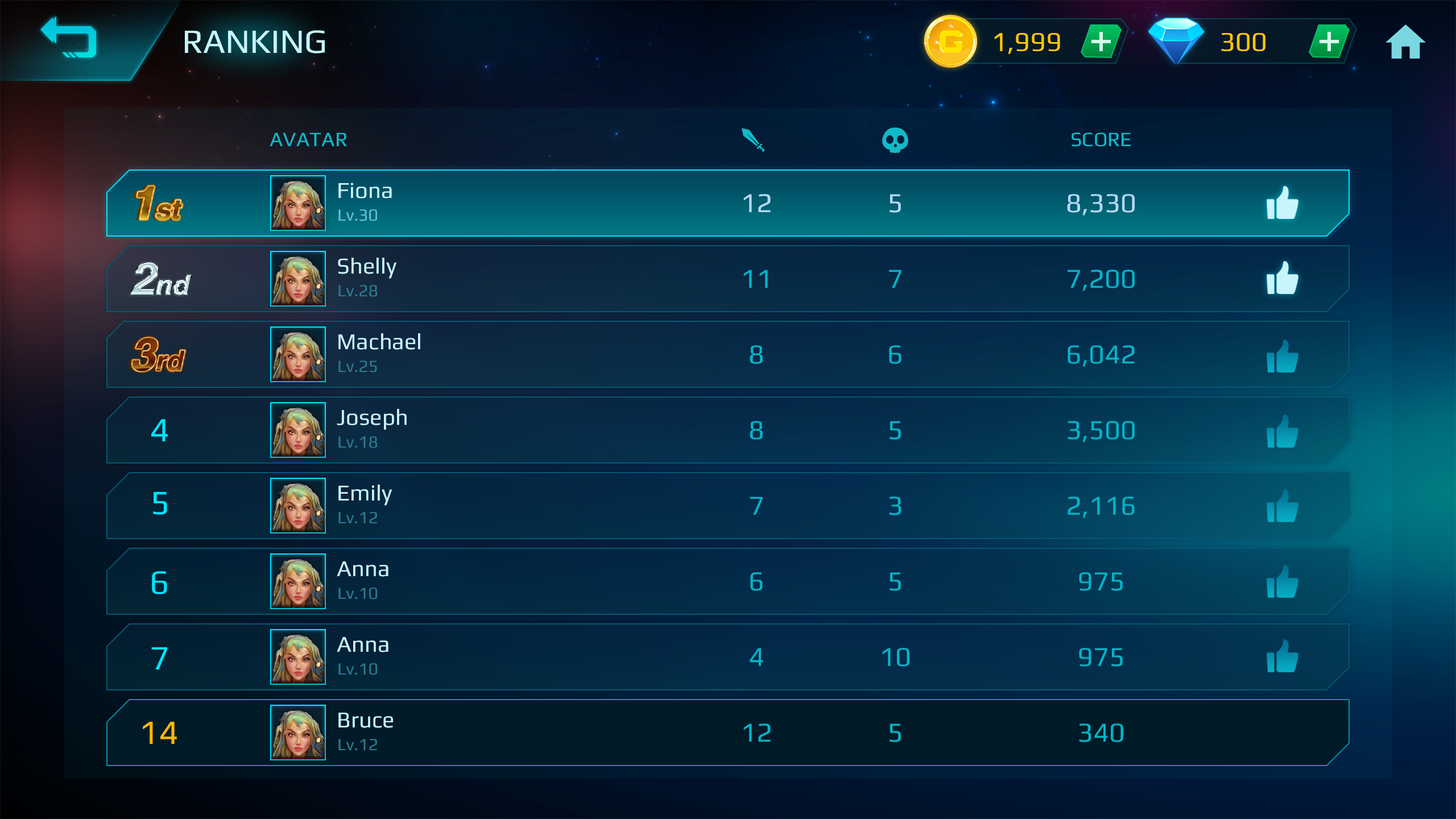
<style>
.page{position:relative;width:1456px;height:819px}
.page>*{position:absolute;margin:0}
.t1{font:34.1px "Play-Regular";color:#c6f6fc}
.t2{font:27.3px "Play-Regular";color:#ffc600}
.t3{font:20.5px "Play-Regular";color:#12b9c8}
.t4{font:22.7px "Play-Regular";color:#c7f3fb}
.t5{font:27.3px "Play-Regular";color:#b4d9ff}
.t6{font:17.1px "Play-Regular";color:#5ec2df}
.t7{font:27.3px "Play-Regular";color:#06b3c8}
.t8{font:17.1px "Play-Regular";color:#2d7a90}
.t9{font:34.1px "Play-Regular";color:#00e4ff}
.t10{font:34.1px "Play-Regular";color:#ffba00}
</style>
<div class="page">
<p class="t1" style="left:185px;top:30px;width:140px;height:23px">RANKING</p>
<p class="t2" style="left:994px;top:33px;width:66px;height:21px">1,999</p>
<p class="t2" style="left:1221px;top:33px;width:44px;height:18px">300</p>
<p class="t3" style="left:270px;top:133px;width:77px;height:13px">AVATAR</p>
<p class="t3" style="left:1072px;top:133px;width:59px;height:14px">SCORE</p>
<p class="t4" style="left:338px;top:183px;width:54px;height:15px">Fiona</p>
<p class="t5" style="left:743px;top:194px;width:28px;height:18px">12</p>
<p class="t5" style="left:890px;top:194px;width:11px;height:19px">5</p>
<p class="t5" style="left:1067px;top:194px;width:68px;height:22px">8,330</p>
<p class="t6" style="left:338px;top:209px;width:39px;height:12px">Lv.30</p>
<p class="t4" style="left:338px;top:258px;width:59px;height:21px">Shelly</p>
<p class="t7" style="left:743px;top:270px;width:25px;height:18px">11</p>
<p class="t7" style="left:889px;top:270px;width:12px;height:18px">7</p>
<p class="t7" style="left:1068px;top:270px;width:67px;height:21px">7,200</p>
<p class="t8" style="left:338px;top:285px;width:39px;height:12px">Lv.28</p>
<p class="t4" style="left:338px;top:333px;width:82px;height:17px">Machael</p>
<p class="t7" style="left:750px;top:345px;width:13px;height:19px">8</p>
<p class="t7" style="left:889px;top:345px;width:12px;height:19px">6</p>
<p class="t7" style="left:1068px;top:345px;width:67px;height:22px">6,042</p>
<p class="t8" style="left:338px;top:361px;width:39px;height:12px">Lv.25</p>
<p class="t4" style="left:337px;top:409px;width:70px;height:21px">Joseph</p>
<p class="t9" style="left:151px;top:419px;width:17px;height:22px">4</p>
<p class="t7" style="left:750px;top:421px;width:13px;height:19px">8</p>
<p class="t7" style="left:890px;top:421px;width:11px;height:19px">5</p>
<p class="t7" style="left:1068px;top:421px;width:67px;height:21px">3,500</p>
<p class="t8" style="left:338px;top:436px;width:39px;height:12px">Lv.18</p>
<p class="t4" style="left:338px;top:485px;width:54px;height:21px">Emily</p>
<p class="t9" style="left:153px;top:492px;width:14px;height:23px">5</p>
<p class="t7" style="left:750px;top:497px;width:13px;height:18px">7</p>
<p class="t7" style="left:889px;top:497px;width:12px;height:18px">3</p>
<p class="t7" style="left:1068px;top:497px;width:67px;height:21px">2,116</p>
<p class="t8" style="left:338px;top:512px;width:39px;height:11px">Lv.12</p>
<p class="t4" style="left:337px;top:561px;width:51px;height:16px">Anna</p>
<p class="t9" style="left:152px;top:571px;width:15px;height:23px">6</p>
<p class="t7" style="left:750px;top:572px;width:13px;height:19px">6</p>
<p class="t7" style="left:890px;top:572px;width:11px;height:19px">5</p>
<p class="t7" style="left:1079px;top:572px;width:44px;height:19px">975</p>
<p class="t8" style="left:338px;top:588px;width:39px;height:11px">Lv.10</p>
<p class="t4" style="left:337px;top:637px;width:51px;height:15px">Anna</p>
<p class="t9" style="left:151px;top:647px;width:16px;height:22px">7</p>
<p class="t7" style="left:750px;top:648px;width:13px;height:18px">4</p>
<p class="t7" style="left:882px;top:648px;width:27px;height:19px">10</p>
<p class="t7" style="left:1079px;top:648px;width:44px;height:19px">975</p>
<p class="t8" style="left:338px;top:663px;width:39px;height:12px">Lv.10</p>
<p class="t4" style="left:338px;top:713px;width:55px;height:15px">Bruce</p>
<p class="t10" style="left:143px;top:722px;width:34px;height:22px">14</p>
<p class="t7" style="left:743px;top:723px;width:28px;height:19px">12</p>
<p class="t7" style="left:890px;top:723px;width:11px;height:19px">5</p>
<p class="t7" style="left:1079px;top:723px;width:44px;height:19px">340</p>
<p class="t8" style="left:338px;top:739px;width:39px;height:11px">Lv.12</p>
</div>
